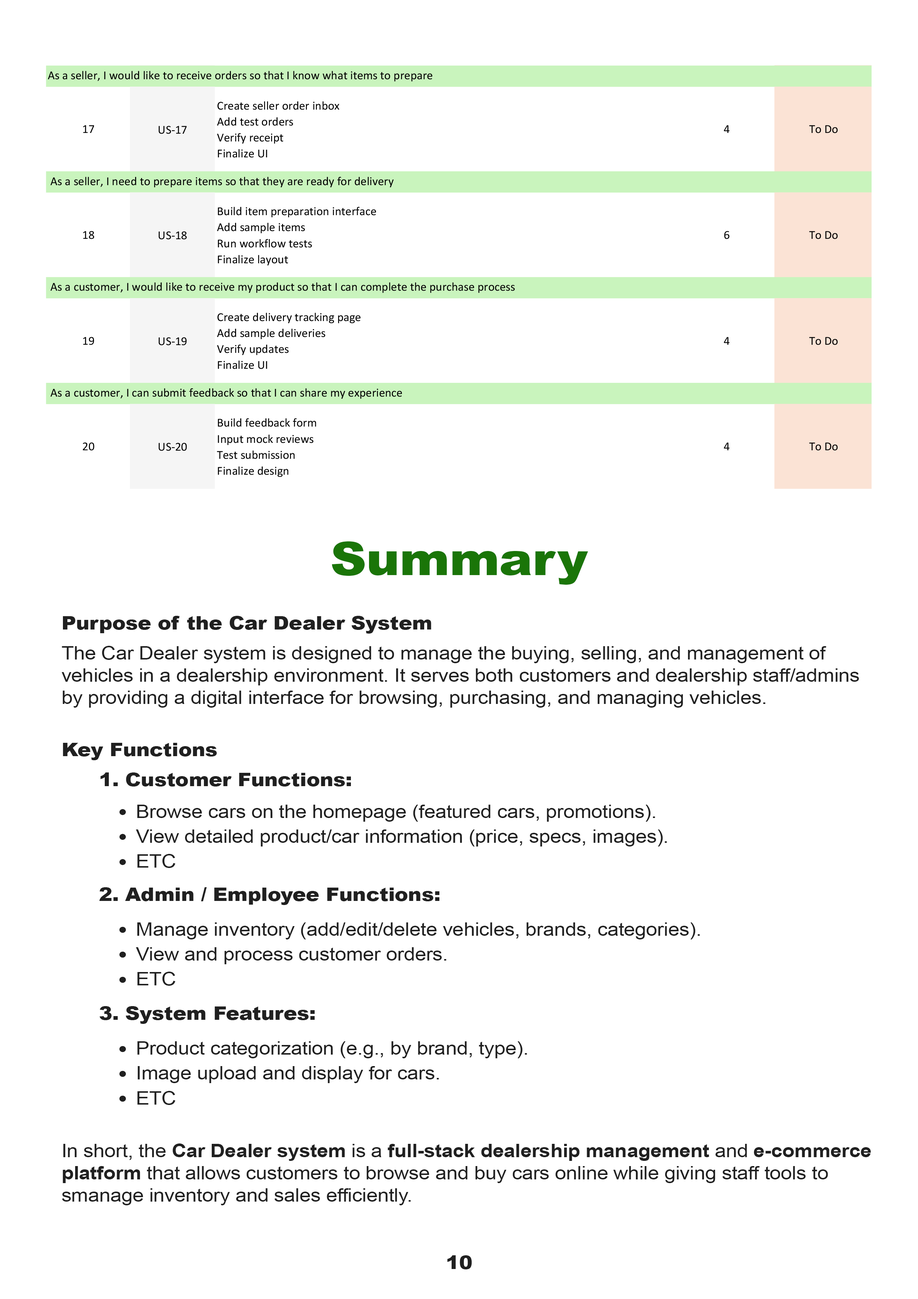
<style>
.page{position:relative;width:918px;height:1299px;background:#ffffff}
.page>*{position:absolute;margin:0}
.t1{font:45.8px "Arial-Black";letter-spacing:-0.01em;color:#1a7508;scale:1.1 1}
.t2{font:18.5px "Arial-Black";letter-spacing:-0.01em;color:#202020;scale:1.1 1}
.t3{font:18.5px "ArialMT";letter-spacing:-0.01em;color:#202020;scale:1.1 1}
.t4{font:18.5px "Arial-BoldMT";letter-spacing:-0.01em;color:#202020;scale:1.1 1}
</style>
<div class="page">
<p class="t1" style="left:332px;top:541px;width:256px;height:44px">Summary</p>
<p class="t2" style="left:63px;top:616px;width:368px;height:17px">Purpose of the Car Dealer System</p>
<p class="t3" style="left:61px;top:646px;width:798px;height:61px">The Car Dealer system is designed to manage the buying, selling, and management of <br>vehicles in a dealership environment. It serves both customers and dealership staff/admins <br>by providing a digital interface for browsing, purchasing, and managing vehicles.</p>
<p class="t2" style="left:63px;top:743px;width:154px;height:17px">Key Functions</p>
<p class="t2" style="left:100px;top:772px;width:251px;height:14px">1. Customer Functions:</p>
<p class="t3" style="left:137px;top:804px;width:518px;height:18px">Browse cars on the homepage (featured cars, promotions).</p>
<p class="t3" style="left:136px;top:829px;width:531px;height:17px">View detailed product/car information (price, specs, images).</p>
<p class="t3" style="left:137px;top:854px;width:38px;height:14px">ETC</p>
<p class="t2" style="left:99px;top:887px;width:340px;height:18px">2. Admin / Employee Functions:</p>
<p class="t3" style="left:137px;top:922px;width:563px;height:17px">Manage inventory (add/edit/delete vehicles, brands, categories).</p>
<p class="t3" style="left:136px;top:947px;width:310px;height:17px">View and process customer orders.</p>
<p class="t3" style="left:137px;top:971px;width:38px;height:15px">ETC</p>
<p class="t2" style="left:100px;top:1006px;width:215px;height:18px">3. System Features:</p>
<p class="t3" style="left:137px;top:1041px;width:390px;height:17px">Product categorization (e.g., by brand, type).</p>
<p class="t3" style="left:138px;top:1066px;width:301px;height:17px">Image upload and display for cars.</p>
<p class="t3" style="left:137px;top:1091px;width:38px;height:14px">ETC</p>
<p class="t3" style="left:62px;top:1143px;width:809px;height:62px">In short, the <span class="t4">Car Dealer system</span> is a <span class="t4">full-stack dealership management</span> and <span class="t4">e-commerce <br>platform</span> that allows customers to browse and buy cars online while giving staff tools to <br>smanage inventory and sales efficiently.</p>
<p class="t2" style="left:447px;top:1255px;width:25px;height:14px">10</p>
</div>
